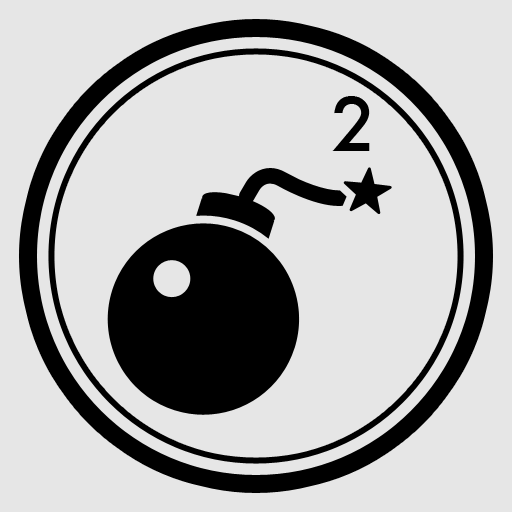
<style>
.page{position:relative;width:512px;height:512px;background:#e6e6e6}
.page>*{position:absolute;margin:0}
.t1{font:72px "Futura-Medium";color:#000000}
</style>
<div class="page">
<p class="t1" style="left:332px;top:96px;width:38px;height:55px">2</p>
</div>
